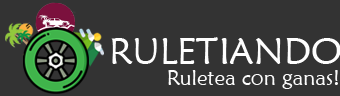
<style>
.page{position:relative;width:340px;height:96px;background:#333333}
.page>*{position:absolute;margin:0}
.t1{font:37.1px "MaiandraGD-Regular";color:#fefefe}
.t2{font:21.3px "MaiandraGD-Regular";color:#fcfcfc}
</style>
<div class="page">
<p class="t1" style="left:111px;top:37px;width:230px;height:27px">RULETIANDO</p>
<p class="t2" style="left:168px;top:70px;width:170px;height:19px">Ruletea con ganas!</p>
</div>
